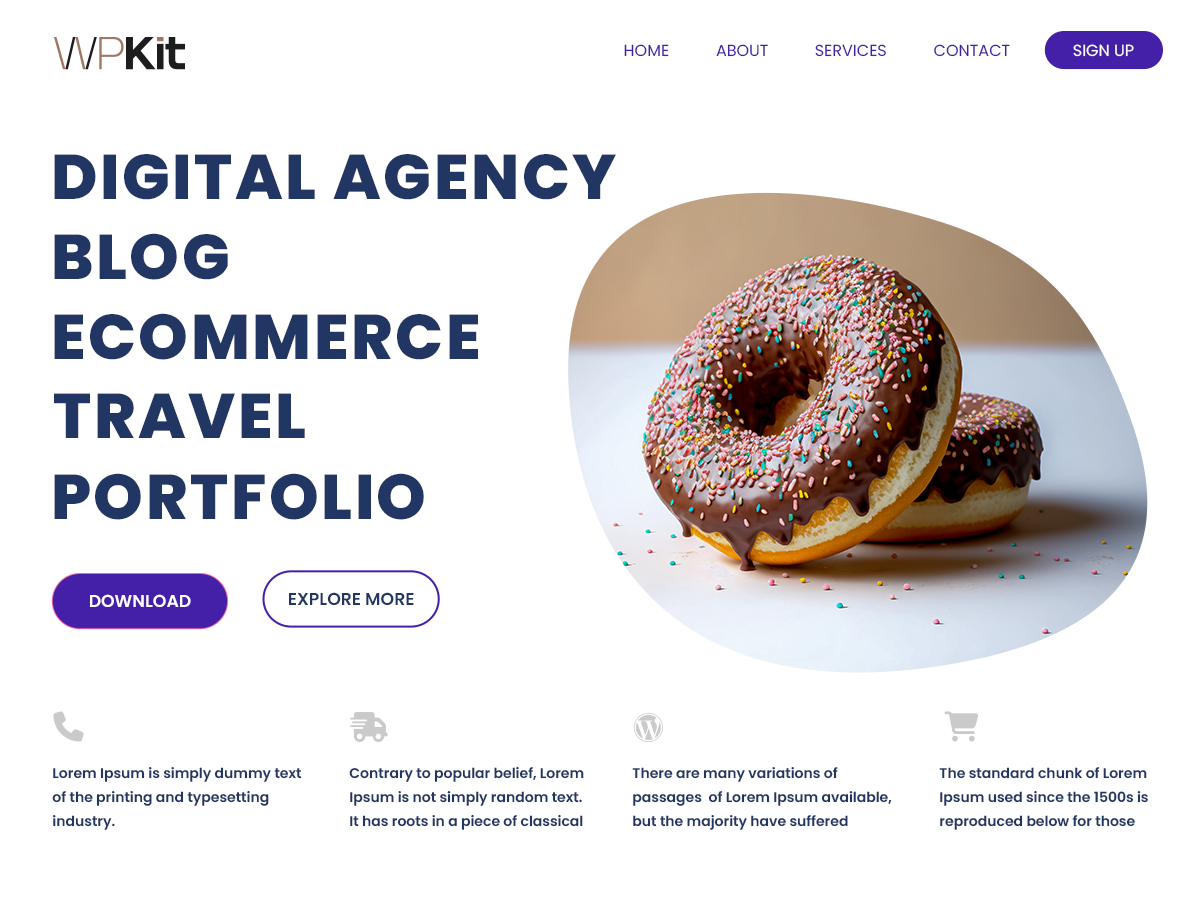
<style>
.page{position:relative;width:1200px;height:900px;background:#ffffff}
.page>*{position:absolute;margin:0}
.t1{font:16px "Poppins-Regular";color:#441fa8;text-transform:uppercase}
.t2{font:16px "Poppins-Regular";color:#fefefe;text-transform:uppercase}
.t3{font:63.1px "Poppins-ExtraBold";letter-spacing:0.04em;color:#223663;text-transform:uppercase}
.t4{font:17.3px "Poppins-SemiBold";color:#223663;text-transform:uppercase}
.t5{font:17.3px "Poppins-SemiBold";color:#ffffff;text-transform:uppercase}
.t6{font:14px/24px "Poppins-SemiBold";color:#223663}
</style>
<div class="page">
<p class="t1" style="left:624px;top:44px;width:45px;height:13px">Home</p>
<p class="t1" style="left:716px;top:44px;width:52px;height:13px">About</p>
<p class="t1" style="left:815px;top:44px;width:71px;height:13px">Services</p>
<p class="t1" style="left:934px;top:44px;width:76px;height:13px">Contact</p>
<p class="t2" style="left:1073px;top:44px;width:61px;height:13px">Sign Up</p>
<p class="t3" style="left:54px;top:154px;width:562px;height:46px">DIGITAL Agency</p>
<p class="t3" style="left:54px;top:233px;width:174px;height:47px">Blog</p>
<p class="t3" style="left:54px;top:313px;width:424px;height:47px">Ecommerce</p>
<p class="t3" style="left:54px;top:393px;width:251px;height:45px">Travel</p>
<p class="t3" style="left:54px;top:473px;width:370px;height:47px">Portfolio</p>
<p class="t4" style="left:289px;top:592px;width:125px;height:13px">Explore More</p>
<p class="t5" style="left:90px;top:594px;width:101px;height:13px">Download</p>
<p class="t6" style="left:52px;top:767px;width:250px;height:63px">Lorem Ipsum is simply dummy text <br>of the printing and typesetting <br>industry.</p>
<p class="t6" style="left:349px;top:766px;width:235px;height:64px">Contrary to popular belief, Lorem <br>Ipsum is not simply random text. <br>It has roots in a piece of classical</p>
<p class="t6" style="left:632px;top:767px;width:260px;height:63px">There are many variations of <br>passages  of Lorem Ipsum available, <br>but the majority have suffered</p>
<p class="t6" style="left:939px;top:767px;width:209px;height:63px">The standard chunk of Lorem <br>Ipsum used since the 1500s is <br>reproduced below for those</p>
</div>
